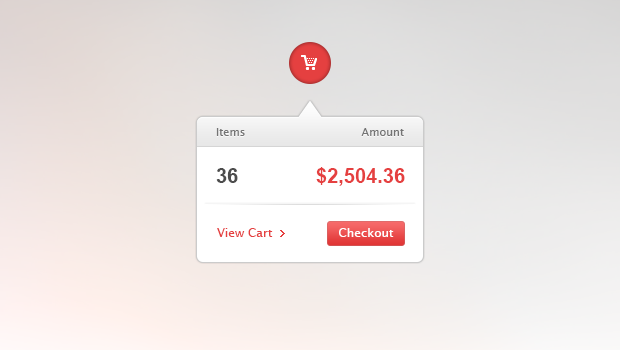
<style>
.page{position:relative;width:620px;height:350px}
.page>*{position:absolute;margin:0}
.t1{font:11px "LucidaSansUnicode";color:#747474}
.t2{font:20px "Arial-BoldMT";color:#4d4d4d}
.t3{font:20px "Arial-BoldMT";color:#e54040}
.t4{font:12px "LucidaSansUnicode";color:#e54040}
.t5{font:12px "LucidaSansUnicode";color:#ffffff}
</style>
<div class="page">
<p class="t1" style="left:216px;top:128px;width:29px;height:8px">Items</p>
<p class="t1" style="left:361px;top:128px;width:43px;height:8px">Amount</p>
<p class="t2" style="left:216px;top:168px;width:22px;height:15px">36</p>
<p class="t3" style="left:316px;top:167px;width:89px;height:19px">$2,504.36</p>
<p class="t4" style="left:217px;top:228px;width:56px;height:9px">View Cart</p>
<p class="t5" style="left:339px;top:228px;width:55px;height:9px">Checkout</p>
</div>
